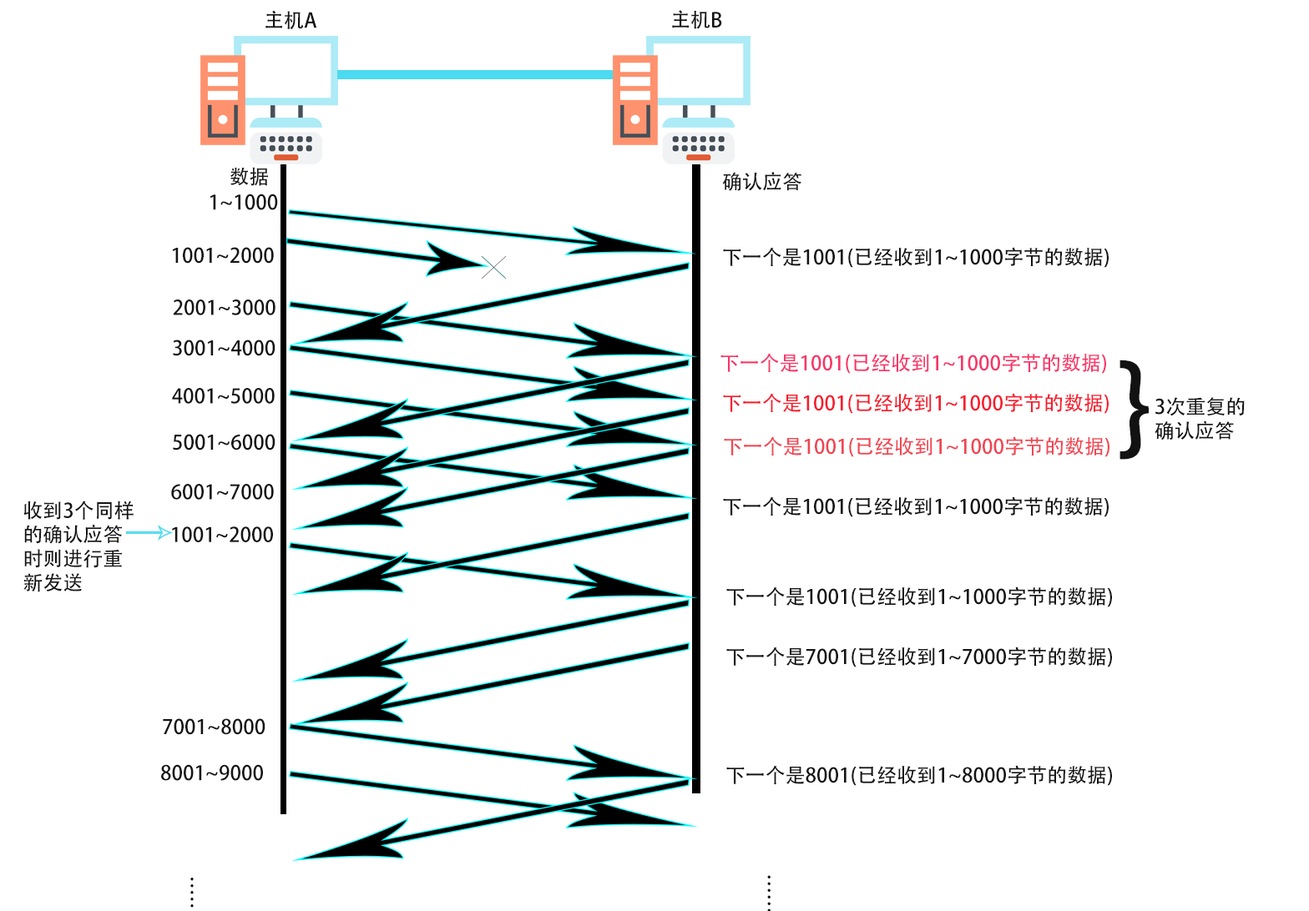
<style>
.page{position:relative;width:1309px;height:911px;background:#ffffff}
.page>*{position:absolute;margin:0}
.t1{font:20px "AdobeHeitiStd-Regular";color:#151414}
.t2{font:20px "AdobeHeitiStd-Regular";color:#f83769}
.t3{font:109.3px "AdobeHeitiStd-Regular";color:#121212}
.t4{font:20px "AdobeHeitiStd-Regular";color:#f81c2d}
.t5{font:20px "AdobeHeitiStd-Regular";color:#121212}
.t6{font:20px "AdobeHeitiStd-Regular";color:#f04652}
</style>
<div class="page">
<p class="t1" style="left:265px;top:10px;width:52px;height:19px">主机A</p>
<p class="t1" style="left:672px;top:10px;width:50px;height:19px">主机B</p>
<p class="t1" style="left:229px;top:167px;width:39px;height:19px">数据</p>
<p class="t1" style="left:722px;top:172px;width:79px;height:19px">确认应答</p>
<p class="t1" style="left:209px;top:194px;width:69px;height:16px">1~1000</p>
<p class="t1" style="left:172px;top:247px;width:102px;height:17px">1001~2000</p>
<p class="t1" style="left:723px;top:247px;width:385px;height:21px">下一个是1001(已经收到1~1000字节的数据)</p>
<p class="t1" style="left:173px;top:300px;width:102px;height:15px">2001~3000</p>
<p class="t1" style="left:173px;top:340px;width:102px;height:16px">3001~4000</p>
<p class="t2" style="left:720px;top:353px;width:386px;height:21px">下一个是1001(已经收到1~1000字节的数据)</p>
<p class="t3" style="left:1119px;top:360px;width:29px;height:100px">}</p>
<p class="t1" style="left:172px;top:388px;width:103px;height:16px">4001~5000</p>
<p class="t4" style="left:723px;top:393px;width:385px;height:21px">下一个是1001(已经收到1~1000字节的数据)</p>
<p class="t5" style="left:1154px;top:397px;width:90px;height:44px">3次重复的<br>确认应答</p>
<p class="t1" style="left:173px;top:434px;width:102px;height:17px">5001~6000</p>
<p class="t6" style="left:724px;top:436px;width:385px;height:21px">下一个是1001(已经收到1~1000字节的数据)</p>
<p class="t1" style="left:171px;top:484px;width:103px;height:16px">6001~7000</p>
<p class="t1" style="left:723px;top:497px;width:385px;height:20px">下一个是1001(已经收到1~1000字节的数据)</p>
<p class="t1" style="left:23px;top:501px;width:111px;height:92px">收到3个同样<br>的确认应答<br>时则进行重<br>新发送</p>
<p class="t1" style="left:172px;top:527px;width:101px;height:15px">1001~2000</p>
<p class="t1" style="left:726px;top:587px;width:386px;height:21px">下一个是1001(已经收到1~1000字节的数据)</p>
<p class="t1" style="left:726px;top:647px;width:386px;height:21px">下一个是7001(已经收到1~7000字节的数据)</p>
<p class="t1" style="left:163px;top:719px;width:102px;height:16px">7001~8000</p>
<p class="t1" style="left:161px;top:764px;width:102px;height:17px">8001~9000</p>
<p class="t1" style="left:726px;top:765px;width:386px;height:21px">下一个是8001(已经收到1~8000字节的数据)</p>
<p class="t1" style="left:767px;top:875px;width:3px;height:37px">……</p>
</div>
